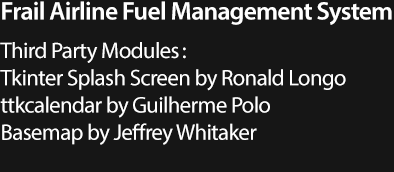
<style>
.page{position:relative;width:394px;height:172px;background:#161616}
.page>*{position:absolute;margin:0}
.t1{font:22.7px "MyriadPro-Regular";letter-spacing:-0.025em;color:#ffffff}
.t2{font:25.5px "MyriadPro-Semibold";letter-spacing:-0.025em;color:#ffffff}
</style>
<div class="page">
<p class="t1" style="left:0px;top:1px;width:392px;height:144px;text-align:justify"><span class="t2">Frail Airline Fuel Management System<br></span>Third Party Modules<br>Tkinter Splash Screen by Ronald Longo <br>ttkcalendar by Guilherme Polo<br>Basemap by Jeffrey Whitaker</p>
<p class="t1" style="left:183px;top:47px;width:3px;height:12px">:</p>
</div>
